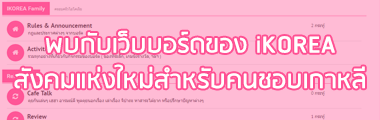
<style>
.page{position:relative;width:380px;height:120px;background:#ffbbd5}
.page>*{position:absolute;margin:0}
.t1{font:29.6px "RSU-Bold";color:#ffffff}
</style>
<div class="page">
<p class="t1" style="left:14px;top:30px;width:351px;height:59px;text-align:center">พบกับเว็บบอร์ดของ iKOREA<br>สังคมแห่งใหม่สำหรับคนชอบเกาหลี</p>
</div>
